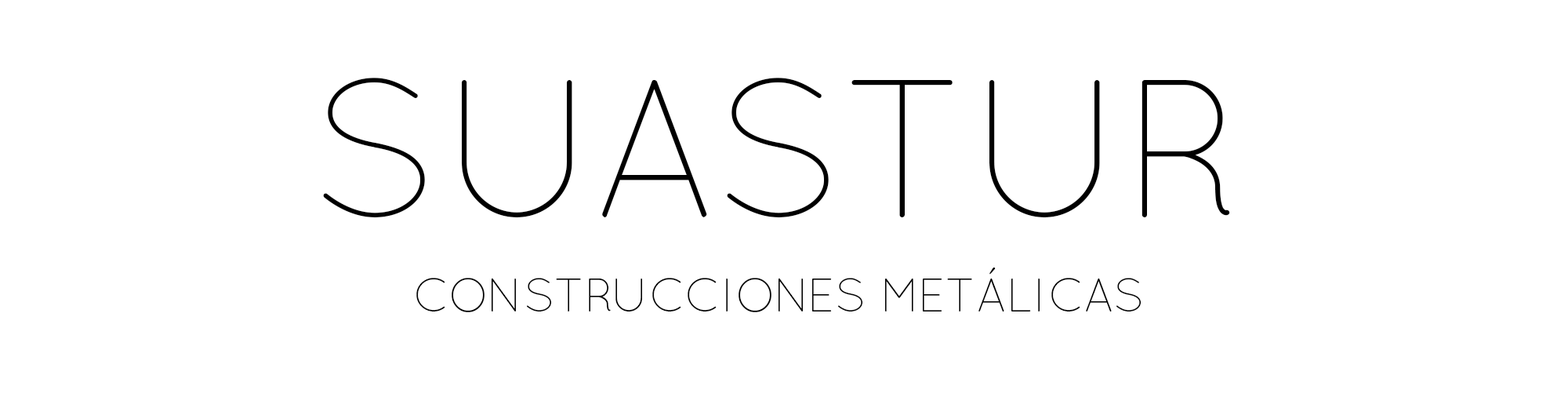
<style>
.page{position:relative;width:1568px;height:397px;background:#ffffff}
.page>*{position:absolute;margin:0}
.t1{font:47px/94.1px "QuicksandLight-Regular";color:#000000}
.t2{font:196px/94.1px "QuicksandLight-Regular";color:#000000}
</style>
<div class="page">
<p class="t1" style="left:323px;top:78px;width:907px;height:234px;text-align:center"><span class="t2">SUASTUR<br></span>CONSTRUCCIONES METÁLICAS</p>
</div>
